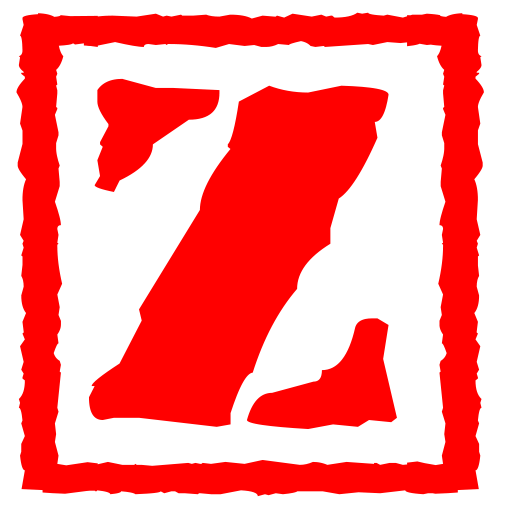
<style>
.page{position:relative;width:512px;height:512px;background:#ffffff}
.page>*{position:absolute;margin:0}
.t1{font:500px "TopSecret";color:#ff0000;scale:1.23 1}
</style>
<div class="page">
<p class="t1" style="left:16px;top:12px;width:468px;height:485px">[z]</p>
</div>
